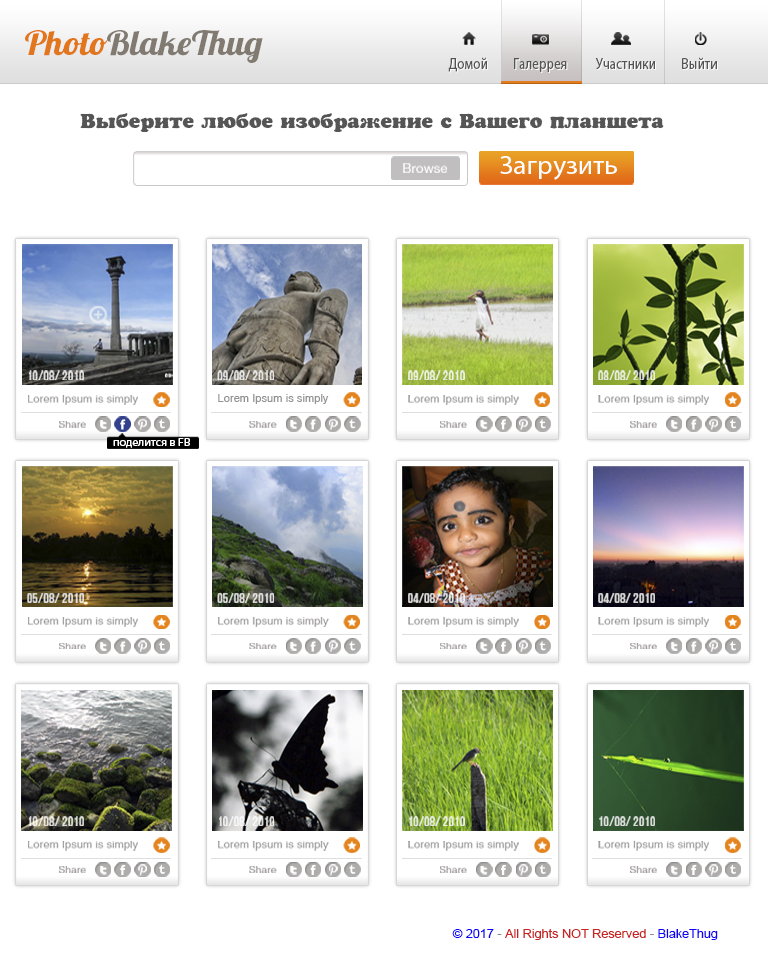
<style>
.page{position:relative;width:768px;height:977px;background:#ffffff}
.page>*{position:absolute;margin:0}
.t1{font:33.7px "Lobster1.4";color:#817a71;scale:1.08 1}
.t2{font:33.7px "Lobster1.4";color:#e2761c;scale:1.08 1}
.t3{font:15.8px "MyriadPro-Regular";color:#545454;scale:0.84 1}
.t4{font:20.1px "a_CooperBlackRg";color:#565555;scale:1.04 1}
.t5{font:26.4px "MyriadPro-Regular";color:#ffffff;scale:1.04 1}
.t6{font:12.9px "HelveticaNeueLT-Roman";color:#ffffff;scale:1.04 1}
.t7{font:13.6px "BebasNeue";color:#e0dfdf;scale:1.04 1}
.t8{font:13.6px "BebasNeue";color:#e7e6e5;scale:1.04 1}
.t9{font:13.6px "BebasNeue";color:#edf1e0;scale:1.04 1}
.t10{font:13.6px "BebasNeue";color:#eaeede;scale:1.04 1}
.t11{font:10.7px "HelveticaCE-Regular";color:#979393;scale:1.04 1}
.t12{font:10.7px "HelveticaCE-Regular";color:#959292;scale:1.04 1}
.t13{font:10px "HelveticaCE-Regular";color:#9f9898;scale:1.04 1}
.t14{font:10.5px "MyriadPro-Regular";color:#ffffff;scale:1.13 1}
.t15{font:13.6px "BebasNeue";color:#e3e1dd;scale:1.04 1}
.t16{font:13.6px "BebasNeue";color:#dfdfde;scale:1.04 1}
.t17{font:13.6px "BebasNeue";color:#ddddde;scale:1.04 1}
.t18{font:13.6px "BebasNeue";color:#dcdcdc;scale:1.04 1}
.t19{font:13.6px "BebasNeue";color:#e5e4e0;scale:1.04 1}
.t20{font:13.6px "BebasNeue";color:#ffffff;scale:1.04 1}
.t21{font:13.6px "BebasNeue";color:#e8eedf;scale:1.04 1}
.t22{font:13.6px "BebasNeue";color:#dfe3df;scale:1.04 1}
.t23{font:11.7px "ArialMT";color:#c72424;scale:1.08 1}
.t24{font:11.7px "ArialMT";color:#0b00fa;scale:1.08 1}
.t25{font:11.7px "ArialMT";color:#8a8989;scale:1.08 1}
.t26{font:11.7px "ArialMT";color:#1100fa;scale:1.08 1}
</style>
<div class="page">
<p class="t1" style="left:25px;top:30px;width:238px;height:33px"><span class="t2">Photo</span>BlakeThug</p>
<p class="t3" style="left:448px;top:57px;width:269px;height:15px">Домой         Галеррея          Участники         Выйти</p>
<p class="t4" style="left:80px;top:113px;width:584px;height:19px">Выберите любое изображение с Вашего планшета</p>
<p class="t5" style="left:500px;top:156px;width:117px;height:24px">Загрузить</p>
<p class="t6" style="left:403px;top:163px;width:44px;height:10px">Browse</p>
<p class="t7" style="left:29px;top:370px;width:55px;height:10px">10/08/ 2010</p>
<p class="t8" style="left:217px;top:370px;width:57px;height:10px">09/08/ 2010</p>
<p class="t9" style="left:408px;top:370px;width:57px;height:10px">09/08/ 2010</p>
<p class="t10" style="left:598px;top:370px;width:57px;height:10px">08/08/ 2010</p>
<p class="t11" style="left:28px;top:395px;width:110px;height:10px">Lorem Ipsum is simply</p>
<p class="t12" style="left:218px;top:394px;width:111px;height:10px">Lorem Ipsum is simply</p>
<p class="t11" style="left:408px;top:395px;width:111px;height:10px">Lorem Ipsum is simply</p>
<p class="t11" style="left:598px;top:395px;width:111px;height:10px">Lorem Ipsum is simply</p>
<p class="t13" style="left:59px;top:421px;width:27px;height:7px">Share</p>
<p class="t13" style="left:249px;top:421px;width:28px;height:7px">Share</p>
<p class="t13" style="left:440px;top:421px;width:27px;height:7px">Share</p>
<p class="t13" style="left:630px;top:421px;width:27px;height:7px">Share</p>
<p class="t14" style="left:113px;top:438px;width:77px;height:10px">поделится в FB</p>
<p class="t15" style="left:27px;top:593px;width:57px;height:10px">05/08/ 2010</p>
<p class="t16" style="left:217px;top:593px;width:57px;height:10px">05/08/ 2010</p>
<p class="t17" style="left:408px;top:593px;width:57px;height:10px">04/08/ 2010</p>
<p class="t18" style="left:598px;top:593px;width:57px;height:10px">04/08/ 2010</p>
<p class="t11" style="left:28px;top:617px;width:110px;height:10px">Lorem Ipsum is simply</p>
<p class="t11" style="left:218px;top:617px;width:111px;height:10px">Lorem Ipsum is simply</p>
<p class="t11" style="left:408px;top:617px;width:111px;height:10px">Lorem Ipsum is simply</p>
<p class="t11" style="left:598px;top:617px;width:111px;height:10px">Lorem Ipsum is simply</p>
<p class="t13" style="left:59px;top:643px;width:27px;height:6px">Share</p>
<p class="t13" style="left:249px;top:643px;width:28px;height:6px">Share</p>
<p class="t13" style="left:440px;top:643px;width:27px;height:6px">Share</p>
<p class="t13" style="left:630px;top:643px;width:27px;height:6px">Share</p>
<p class="t19" style="left:29px;top:816px;width:55px;height:10px">10/08/ 2010</p>
<p class="t20" style="left:219px;top:816px;width:55px;height:10px;opacity:0.8">10/08/ 2010</p>
<p class="t21" style="left:409px;top:816px;width:56px;height:10px">10/08/ 2010</p>
<p class="t22" style="left:599px;top:816px;width:56px;height:10px">10/08/ 2010</p>
<p class="t11" style="left:28px;top:841px;width:110px;height:10px">Lorem Ipsum is simply</p>
<p class="t11" style="left:218px;top:841px;width:111px;height:10px">Lorem Ipsum is simply</p>
<p class="t11" style="left:408px;top:841px;width:111px;height:10px">Lorem Ipsum is simply</p>
<p class="t11" style="left:598px;top:841px;width:111px;height:10px">Lorem Ipsum is simply</p>
<p class="t13" style="left:59px;top:866px;width:27px;height:7px">Share</p>
<p class="t13" style="left:249px;top:866px;width:28px;height:7px">Share</p>
<p class="t13" style="left:440px;top:866px;width:27px;height:7px">Share</p>
<p class="t13" style="left:630px;top:866px;width:27px;height:7px">Share</p>
<p class="t23" style="left:452px;top:929px;width:266px;height:11px"><span class="t24">© 2017</span><span class="t25"> - </span>All Rights NOT Reserved<span class="t25"> - </span><span class="t26">BlakeThug</span></p>
</div>
